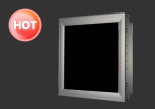
<style>
.page{position:relative;width:155px;height:109px;background:#333333}
.page>*{position:absolute;margin:0}
.t1{font:10.7px "Arial-BoldMT";color:#ffffff;font-weight:bold}
</style>
<div class="page">
<p class="t1" style="left:14px;top:20px;width:23px;height:10px">HOT</p>
</div>
